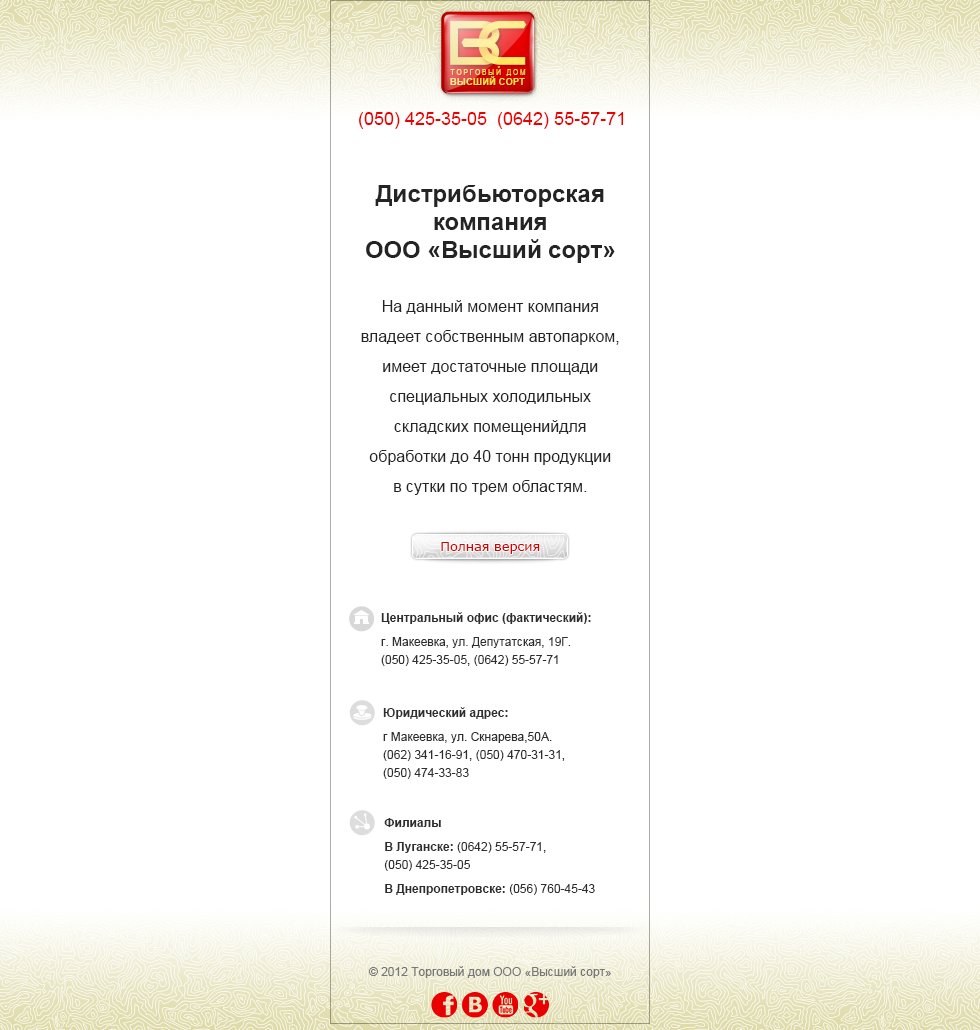
<style>
.page{position:relative;width:980px;height:1030px;background:#ffffff}
.page>*{position:absolute;margin:0}
.t1{font:8.4px "ArialNarrow";letter-spacing:0.2em;text-transform:uppercase}
.t2{font:9.5px "Arial-BoldMT";color:#ffdb49;text-transform:uppercase}
.t3{font:18px "ArialMT";color:#e90000}
.t4{font:16px/30px "ArialMT";color:#242424}
.t5{font:24px/36px "Arial-BoldMT";color:#242424}
.t6{font:24px/28px "Arial-BoldMT";color:#242424}
.t7{font:16px/18px "ArialMT";color:#242424}
.t8{font:16px/36px "ArialMT";color:#242424}
.t9{font:13.5px "Verdana";color:#d50000;scale:0.96 1}
.t10{font:12px/18px "ArialMT";color:#2e2e2e}
.t11{font:12px "Arial-BoldMT";color:#2e2e2e}
.t12{font:12px/24px "ArialMT";color:#2e2e2e}
.t13{font:12px "ArialMT";color:#2e2e2e}
.t14{font:12px/24px "Arial-BoldMT";color:#2e2e2e}
.t15{font:12px "ArialMT";color:#777777}
</style>
<div class="page">
<p class="t1" style="left:450px;top:66px;width:76px;height:10px">торговый дом</p>
<p class="t2" style="left:450px;top:76px;width:75px;height:9px">высший сорт</p>
<p class="t3" style="left:359px;top:112px;width:265px;height:17px">(050) 425-35-05  (0642) 55-57-71</p>
<p class="t4" style="left:361px;top:185px;width:258px;height:310px;text-align:center"><span class="t5">Дистрибьюторская</span><span class="t6"> компания<br>ООО «Высший сорт»<br><br></span><span class="t7">Н</span><span class="t8">а данный момент компания</span> владеет собственным автопарком, имеет достаточные площади специальных холодильных складских помещенийдля обработки до 40 тонн продукции <br>в сутки по трем областям.</p>
<p class="t9" style="left:441px;top:542px;width:99px;height:12px">Полная версия</p>
<p class="t10" style="left:381px;top:612px;width:210px;height:54px"><span class="t11">Центральный офис (фактический):<br></span><span class="t12">г</span>. Макеевка, ул. Депутатская, 19Г.<br>(050) 425-35-05, (0642) 55-57-71</p>
<p class="t10" style="left:383px;top:707px;width:182px;height:72px"><span class="t11">Юридический адрес:<br></span><span class="t12">г</span><span class="t13"> Макеевка, ул. Скнарева,50А.</span><br>(062) 341-16-91, (050) 470-31-31, <br>(050) 474-33-83</p>
<p class="t14" style="left:384px;top:818px;width:211px;height:77px"><span class="t11">Филиалы</span><br>В<span class="t11"> Луганске: </span><span class="t13">(0642) 55-57-71, <br></span><span class="t10">(050) 425-35-05<br></span>В Днепропетровске: <span class="t12">(056) 760-45-43</span></p>
<p class="t15" style="left:368px;top:966px;width:243px;height:12px">© 2012 Торговый дом ООО «Высший сорт»</p>
</div>
